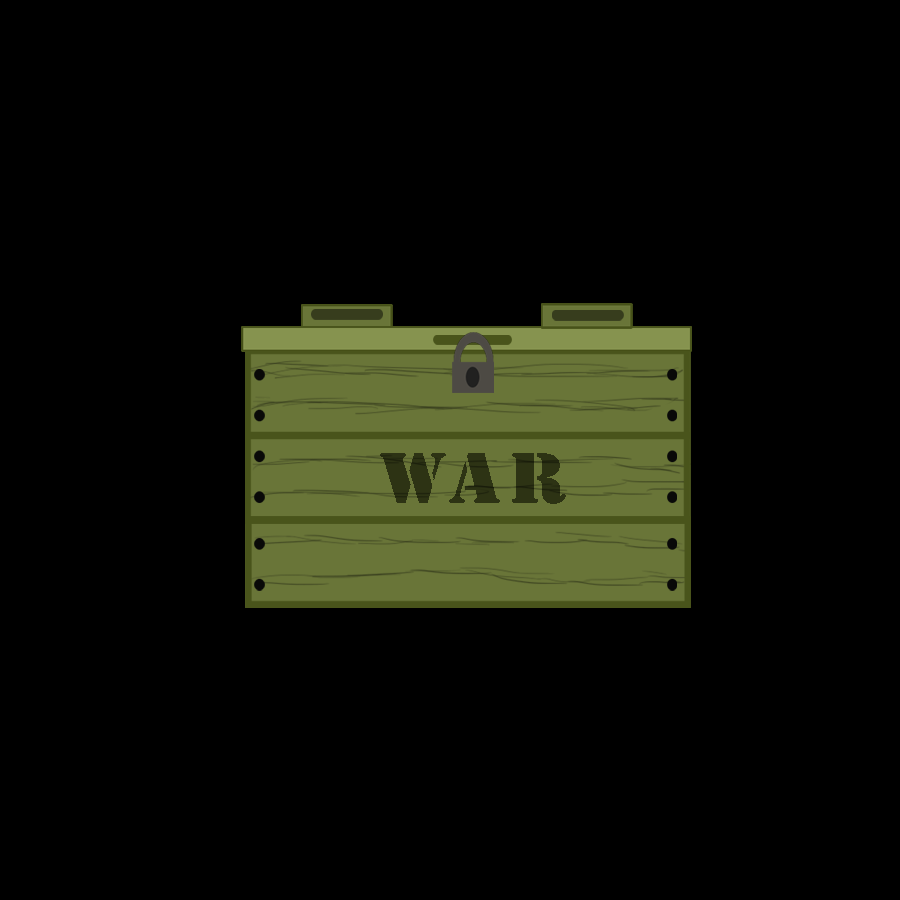
<style>
.page{position:relative;width:900px;height:900px;background:#000000}
.page>*{position:absolute;margin:0}
.t1{font:67.2px "StencilStd";letter-spacing:0.1em;color:#2d3314;scale:1.1 1}
</style>
<div class="page">
<p class="t1" style="left:380px;top:453px;width:186px;height:51px">war</p>
</div>
